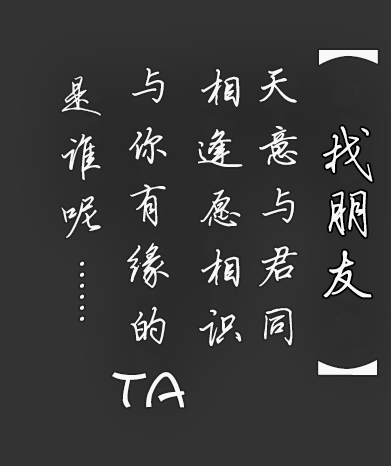
<style>
.page{position:relative;width:391px;height:466px;background:#333333}
.page>*{position:absolute;margin:0}
.t1{font:60px "QXyingbixing";color:#faf8f9}
.t2{font:48px/11px "QXyingbixing";color:#faf8f9}
.t3{font:48px/60px "QXyingbixing";color:#faf8f9}
.t4{font:48px/60px "FZKATJW--GB1-0";color:#faf8f9}
.t5{font:60px/60px "QXyingbixing";color:#faf8f9}
</style>
<div class="page">
<p class="t1" style="left:318px;top:50px;width:60px;height:325px;rotate:90deg">【                 】</p>
<p class="t2" style="left:61px;top:76px;width:40px;height:245px;text-align:center"><span class="t3">是<br>谁<br></span>呢<br><br><br>.<br>.<br>.<br>.<br>.<br>.</p>
<p class="t3" style="left:112px;top:68px;width:73px;height:340px;text-align:center">与<br>你<br>有<br>缘<br>的<br><span class="t4">TA</span></p>
<p class="t3" style="left:198px;top:69px;width:45px;height:277px;text-align:center">相<br>逢<br>愿<br>相<br>识</p>
<p class="t3" style="left:259px;top:68px;width:39px;height:278px;text-align:center">天<br>意<br>与<br>君<br>同</p>
<p class="t5" style="left:323px;top:126px;width:50px;height:172px;text-align:center">找<br>朋<br>友</p>
</div>
